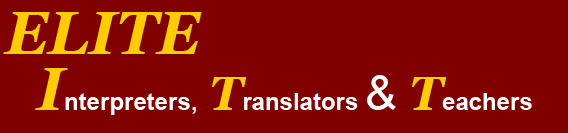
<style>
.page{position:relative;width:568px;height:133px;background:#800000}
.page>*{position:absolute;margin:0}
.t1{font:60px "Georgia-BoldItalic";color:#ffcc00}
.t2{font:24px "Arial-BoldMT";color:#ffffff}
.t3{font:48px "Georgia-BoldItalic";color:#ffcc00}
.t4{font:48px "ArialMT";color:#ffffff}
</style>
<div class="page">
<p class="t1" style="left:3px;top:12px;width:199px;height:42px">ELITE</p>
<p class="t2" style="left:35px;top:68px;width:497px;height:47px"><span class="t1">I</span>nterpreters, <span class="t3">T</span>ranslators <span class="t4">&amp; </span><span class="t3">T</span>eachers</p>
</div>
